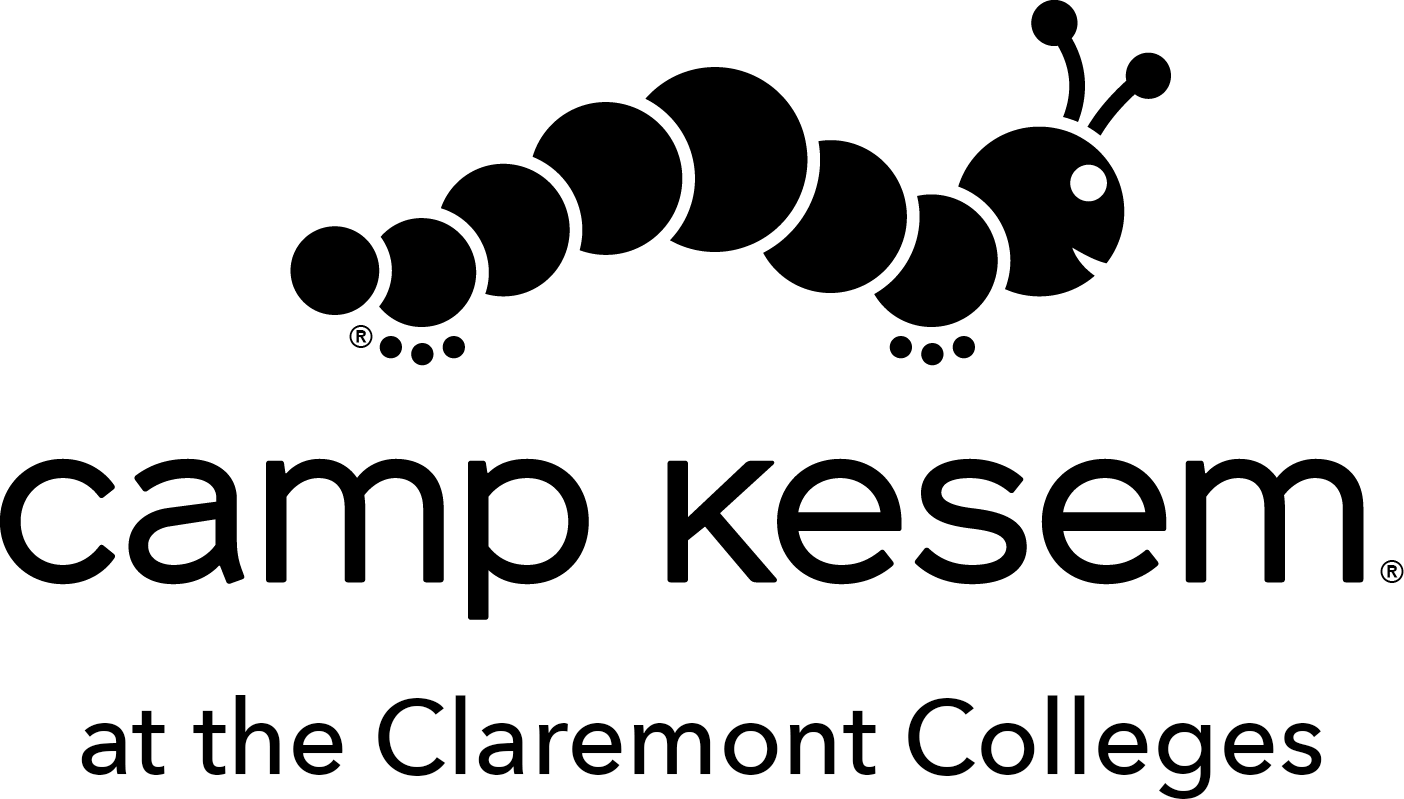
<style>
.page{position:relative;width:1404px;height:799px;background:#ffffff}
.page>*{position:absolute;margin:0}
.t1{font:104.2px "AvenirNext-Medium";color:#000000}
</style>
<div class="page">
<p class="t1" style="left:81px;top:695px;width:1241px;height:104px">at the Claremont Colleges</p>
<p class="t1" style="left:81px;top:695px;width:1241px;height:104px">at the Claremont Colleges</p>
</div>
